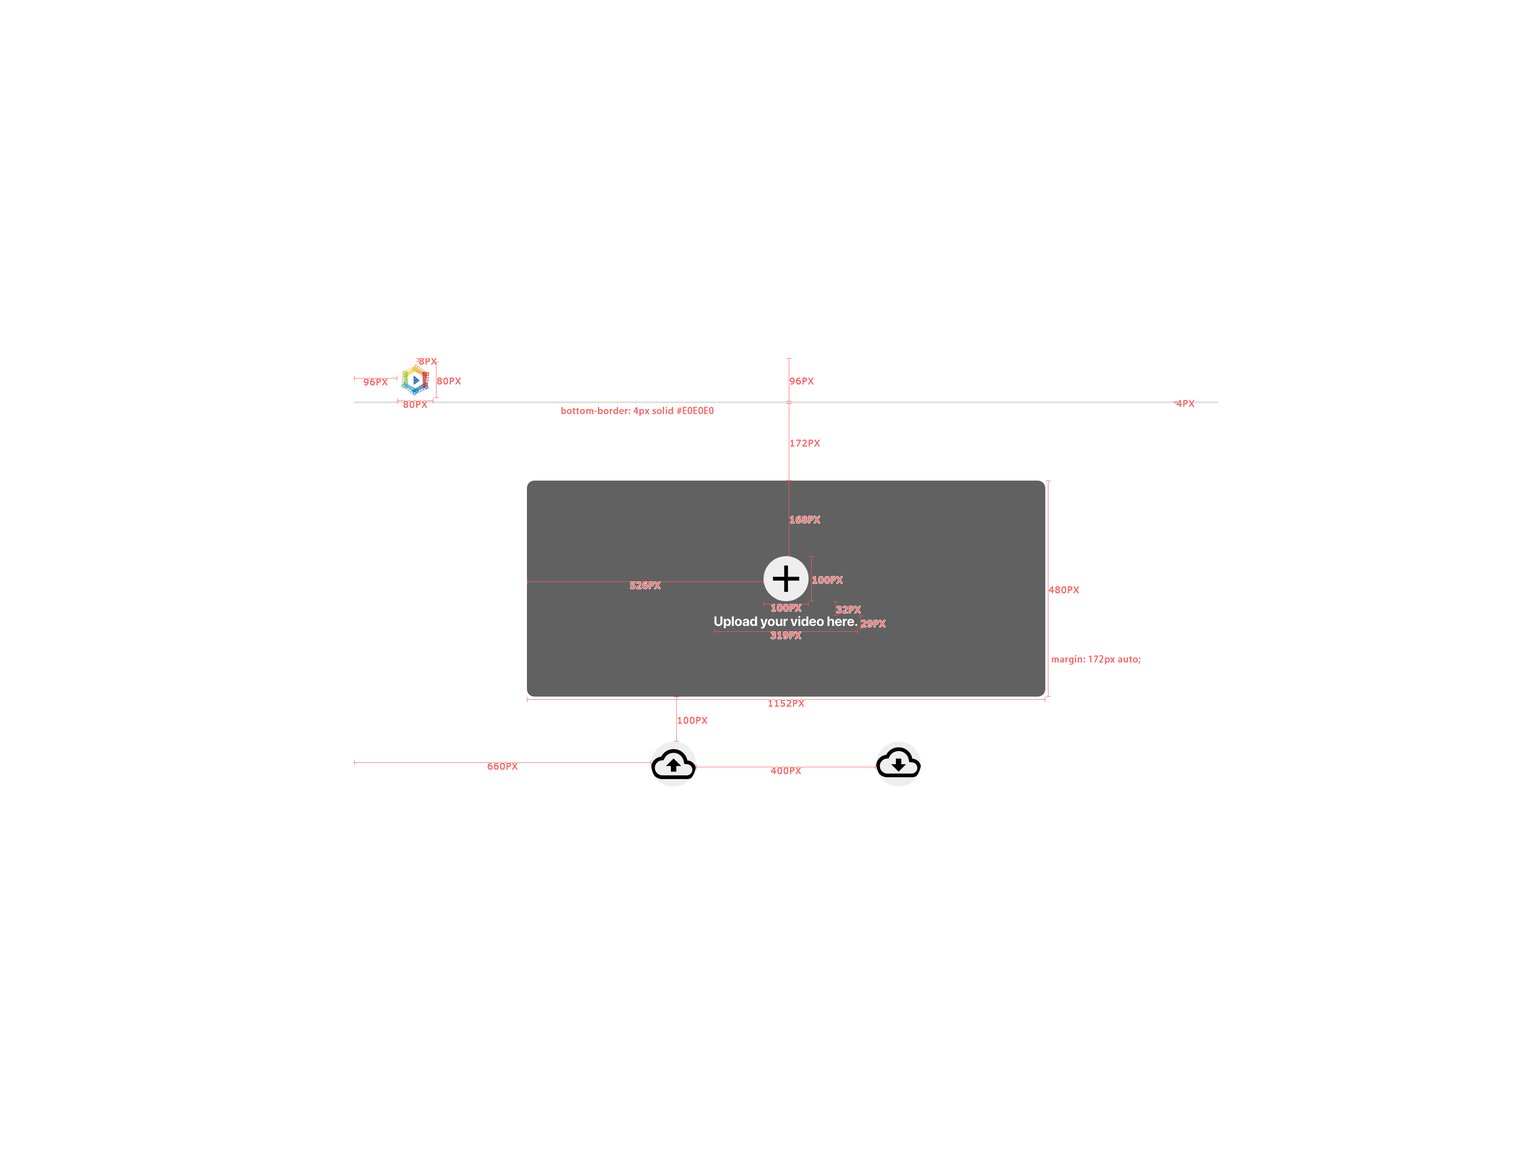
<style>
.page{position:relative;width:1538px;height:1152px;background:#ffffff}
.page>*{position:absolute;margin:0}
.t1{font:9px "Verdana";color:#ff5c5c;font-weight:bold}
.t2{font:9px "AdobeHeitiStd-Regular";color:#ff5c5c;font-weight:bold}
</style>
<div class="page">
<p class="t1" style="left:419px;top:358px;width:18px;height:7px">8PX</p>
<p class="t1" style="left:437px;top:378px;width:24px;height:7px">80PX</p>
<p class="t1" style="left:790px;top:378px;width:24px;height:7px">96PX</p>
<p class="t1" style="left:364px;top:378px;width:24px;height:8px">96PX</p>
<p class="t1" style="left:403px;top:401px;width:25px;height:7px">80PX</p>
<p class="t1" style="left:1176px;top:400px;width:19px;height:7px">4PX</p>
<p class="t2" style="left:561px;top:407px;width:153px;height:9px">bottom-border: 4px solid #E0E0E0</p>
<p class="t1" style="left:790px;top:440px;width:30px;height:7px">172PX</p>
<p class="t1" style="left:790px;top:516px;width:30px;height:7px">168PX</p>
<p class="t1" style="left:630px;top:582px;width:31px;height:7px">526PX</p>
<p class="t1" style="left:813px;top:576px;width:29px;height:8px">100PX</p>
<p class="t1" style="left:1048px;top:586px;width:31px;height:8px">480PX</p>
<p class="t1" style="left:772px;top:604px;width:29px;height:8px">100PX</p>
<p class="t1" style="left:837px;top:606px;width:24px;height:7px">32PX</p>
<p class="t1" style="left:861px;top:620px;width:25px;height:7px">29PX</p>
<p class="t1" style="left:771px;top:632px;width:30px;height:7px">319PX</p>
<p class="t2" style="left:1052px;top:655px;width:89px;height:10px">margin: 172px auto;</p>
<p class="t1" style="left:769px;top:700px;width:36px;height:7px">1152PX</p>
<p class="t1" style="left:678px;top:717px;width:29px;height:7px">100PX</p>
<p class="t1" style="left:487px;top:763px;width:31px;height:7px">660PX</p>
<p class="t1" style="left:771px;top:767px;width:30px;height:7px">400PX</p>
</div>
